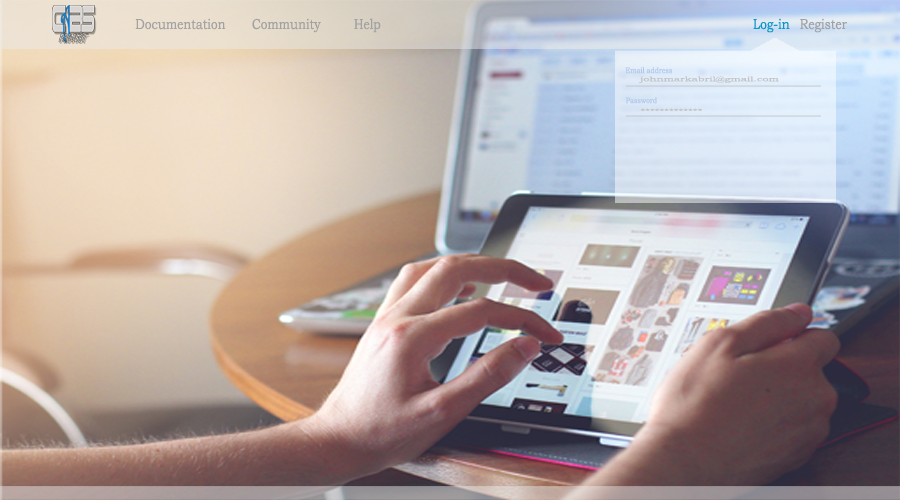
<style>
.page{position:relative;width:900px;height:500px}
.page>*{position:absolute;margin:0}
.t1{font:14.5px "BookmanOldStyle";color:#a1a1a2;scale:0.83 1}
.t2{font:14.5px "BookmanOldStyle";color:#0d95c8;scale:0.83 1}
.t3{font:8.1px "BookmanOldStyle";color:#b2c9e9;scale:0.83 1}
.t4{font:6.6px "BookmanOldStyle";color:#c1c1c1;scale:1.64 1}
</style>
<div class="page">
<p class="t1" style="left:135px;top:18px;width:91px;height:12px">Documentation</p>
<p class="t1" style="left:252px;top:18px;width:69px;height:15px">Community</p>
<p class="t1" style="left:354px;top:18px;width:27px;height:15px">Help</p>
<p class="t2" style="left:753px;top:18px;width:37px;height:15px">Log-in</p>
<p class="t1" style="left:800px;top:18px;width:47px;height:15px">Register</p>
<p class="t3" style="left:625px;top:67px;width:47px;height:7px">Email address</p>
<p class="t4" style="left:639px;top:76px;width:140px;height:7px">johnmarkabril@gmail.com</p>
<p class="t3" style="left:626px;top:97px;width:31px;height:7px">Password</p>
<p class="t4" style="left:640px;top:108px;width:62px;height:3px">*************</p>
</div>
